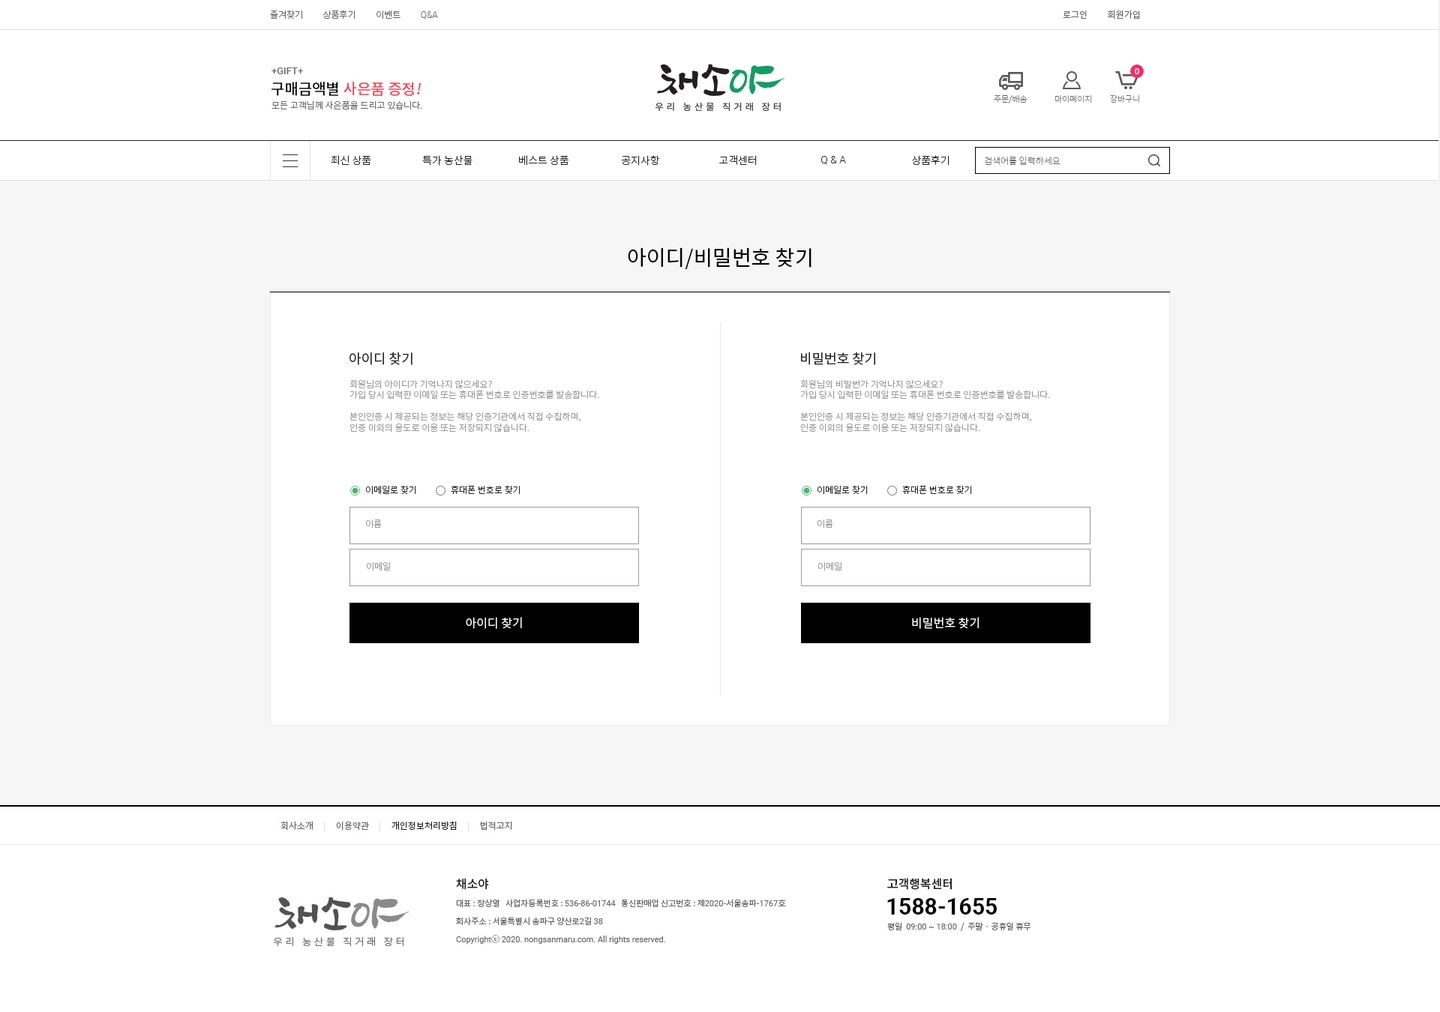
<style>
.page{position:relative;width:1440px;height:1012px;background:#ffffff}
.page>*{position:absolute;margin:0}
.t1{font:9px "NotoSansCJKkr-Light";color:#666666}
.t2{font:9px "Roboto-Light";color:#666666}
.t3{font:9px "NotoSansCJKkr-DemiLight";color:#666666}
.t4{font:9.7px "Roboto-Medium";color:#666666}
.t5{font:15px "NotoSansCJKkr-Medium";color:#ea475c}
.t6{font:15px "NotoSansCJKkr-Medium";color:#000000}
.t7{font:15px "NotoSansCJKkr-Medium";color:#ea475c;font-style:italic}
.t8{font:8.2px "NotoSansCJKkr-Thin";color:#666666}
.t9{font:10.5px "NotoSansCJKkr-Light";color:#222222}
.t10{font:10.5px "Roboto-Light";color:#222222}
.t11{font:9px "NotoSansCJKkr-Thin";color:#666666}
.t12{font:21px "NotoSansCJKkr-Regular";color:#000000}
.t13{font:13.5px "NotoSansCJKkr-Regular";color:#222222}
.t14{font:9px "NotoSansCJKkr-Light";color:#999999}
.t15{font:9px "NotoSansCJKkr-Light";color:#222222}
.t16{font:12px "NotoSansCJKkr-DemiLight";color:#ffffff}
</style>
<div class="page">
<p class="t1" style="left:270px;top:10px;width:168px;height:9px">즐겨찾기          상품후기          이벤트          <span class="t2">Q&amp;A</span></p>
<p class="t3" style="left:1063px;top:10px;width:77px;height:9px">로그인          회원가입</p>
<p class="t4" style="left:271px;top:67px;width:32px;height:7px">+GIFT+</p>
<p class="t5" style="left:271px;top:82px;width:150px;height:14px"><span class="t6">구매금액별 </span>사은품 증정<span class="t7">!</span></p>
<p class="t1" style="left:271px;top:100px;width:151px;height:9px">모든 고객님께 사은품을 드리고 있습니다.</p>
<p class="t8" style="left:994px;top:94px;width:33px;height:9px">주문/배송</p>
<p class="t8" style="left:1054px;top:95px;width:38px;height:8px">마이페이지</p>
<p class="t8" style="left:1110px;top:94px;width:29px;height:9px">장바구니</p>
<p class="t9" style="left:331px;top:155px;width:40px;height:10px">최신 상품</p>
<p class="t9" style="left:422px;top:155px;width:50px;height:11px">특가 농산물</p>
<p class="t9" style="left:519px;top:155px;width:50px;height:11px">베스트 상품</p>
<p class="t9" style="left:622px;top:155px;width:38px;height:11px">공지사항</p>
<p class="t9" style="left:719px;top:155px;width:38px;height:11px">고객센터</p>
<p class="t10" style="left:821px;top:156px;width:25px;height:9px">Q &amp; A</p>
<p class="t9" style="left:912px;top:155px;width:37px;height:11px">상품후기</p>
<p class="t11" style="left:984px;top:156px;width:76px;height:10px">검색어를 입력하세요</p>
<p class="t12" style="left:628px;top:247px;width:183px;height:22px">아이디/비밀번호 찾기</p>
<p class="t13" style="left:349px;top:352px;width:63px;height:13px">아이디 찾기</p>
<p class="t13" style="left:801px;top:352px;width:74px;height:13px">비밀번호 찾기</p>
<p class="t14" style="left:349px;top:379px;width:250px;height:54px">회원님의 아이디가 기억나지 않으세요?<br>가입 당시 입력한 이메일 또는 휴대폰 번호로 인증번호를 발송합니다.<br><br>본인인증 시 제공되는 정보는 해당 인증기관에서 직접 수집하며, <br>인증 이외의 용도로 이용 또는 저장되지 않습니다.</p>
<p class="t14" style="left:800px;top:379px;width:250px;height:54px">회원님의 비밀번가 기억나지 않으세요?<br>가입 당시 입력한 이메일 또는 휴대폰 번호로 인증번호를 발송합니다.<br><br>본인인증 시 제공되는 정보는 해당 인증기관에서 직접 수집하며, <br>인증 이외의 용도로 이용 또는 저장되지 않습니다.</p>
<p class="t15" style="left:365px;top:485px;width:51px;height:10px">이메일로 찾기</p>
<p class="t15" style="left:451px;top:485px;width:69px;height:10px">휴대폰 번호로 찾기</p>
<p class="t15" style="left:817px;top:485px;width:51px;height:10px">이메일로 찾기</p>
<p class="t15" style="left:902px;top:485px;width:70px;height:10px">휴대폰 번호로 찾기</p>
<p class="t14" style="left:365px;top:520px;width:17px;height:9px">이름</p>
<p class="t14" style="left:817px;top:520px;width:16px;height:9px">이름</p>
<p class="t14" style="left:366px;top:562px;width:25px;height:9px">이메일</p>
<p class="t14" style="left:817px;top:562px;width:25px;height:9px">이메일</p>
<p class="t16" style="left:466px;top:617px;width:56px;height:12px">아이디 찾기</p>
<p class="t16" style="left:912px;top:617px;width:67px;height:12px">비밀번호 찾기</p>
</div>
